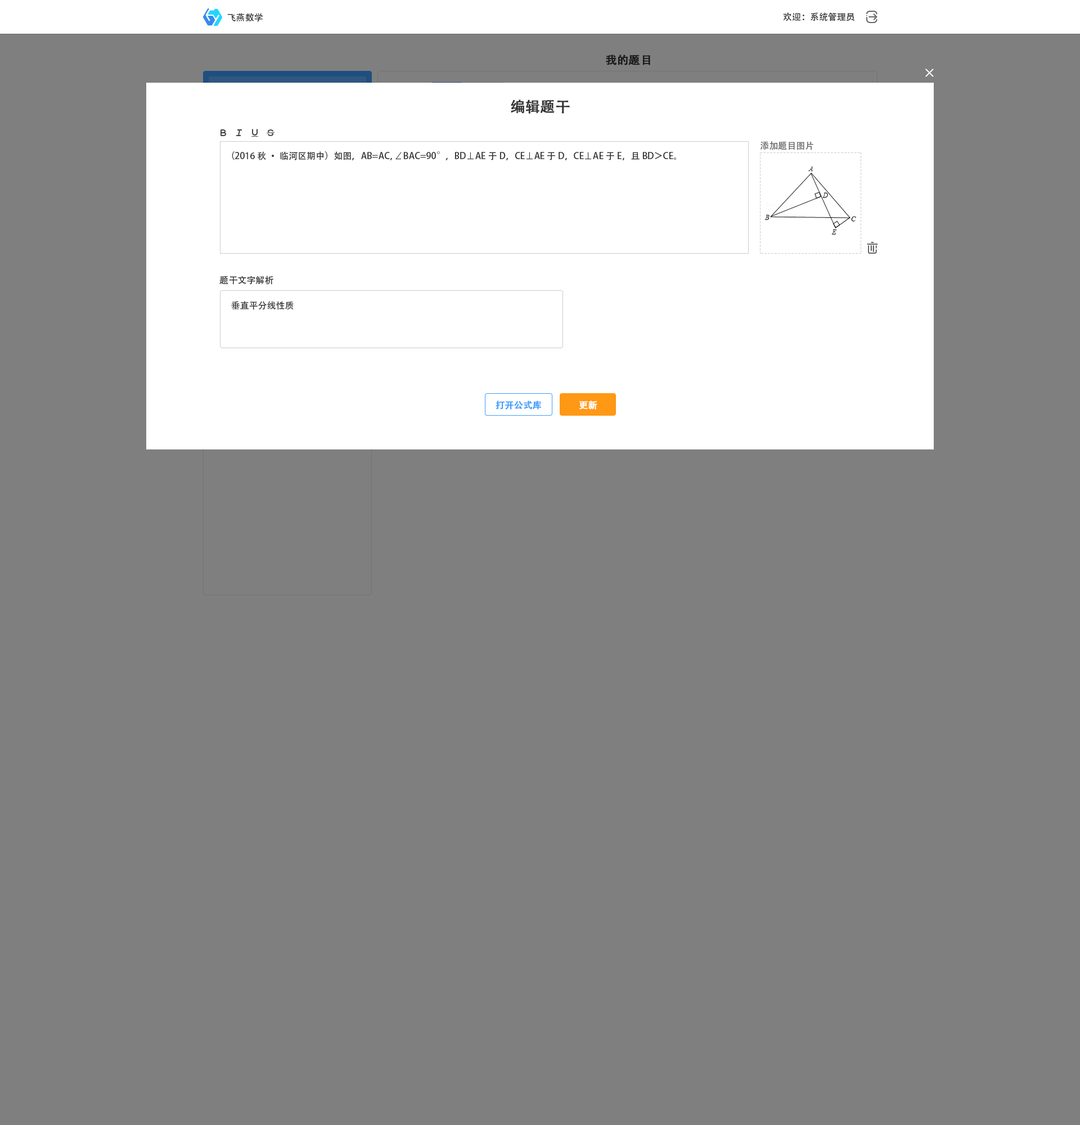
<style>
.page{position:relative;width:1080px;height:1125px;background:#7f7f7f}
.page>*{position:absolute;margin:0}
.t1{font:9px "AdobeHeitiStd-Regular";color:#333333}
.t2{font:11.2px "AdobeHeitiStd-Regular";color:#191919;font-weight:bold}
.t3{font:14.6px "AdobeHeitiStd-Regular";color:#333333;font-weight:bold}
.t4{font:9px "AdobeHeitiStd-Regular";color:#666666}
.t5{font:9px "AdobeHeitiStd-Regular";color:#409eff;font-weight:bold}
.t6{font:9px "AdobeHeitiStd-Regular";color:#ffffff;font-weight:bold}
</style>
<div class="page">
<p class="t1" style="left:227px;top:13px;width:36px;height:9px">飞燕数学</p>
<p class="t1" style="left:783px;top:12px;width:72px;height:9px">欢迎：系统管理员</p>
<p class="t2" style="left:606px;top:55px;width:44px;height:10px">我的题目</p>
<p class="t3" style="left:511px;top:100px;width:59px;height:14px">编辑题干</p>
<p class="t4" style="left:760px;top:141px;width:53px;height:9px">添加题目图片</p>
<p class="t1" style="left:232px;top:151px;width:444px;height:9px">（2016秋·临河区期中）如图，AB=AC，∠BAC=90°，BD⊥AE于D，CE⊥AE于D，CE⊥AE于E，且BD＞CE。</p>
<p class="t1" style="left:219px;top:276px;width:54px;height:9px">题干文字解析</p>
<p class="t1" style="left:231px;top:301px;width:63px;height:9px">垂直平分线性质</p>
<p class="t5" style="left:496px;top:400px;width:45px;height:10px">打开公式库</p>
<p class="t6" style="left:579px;top:400px;width:18px;height:10px">更新</p>
</div>
